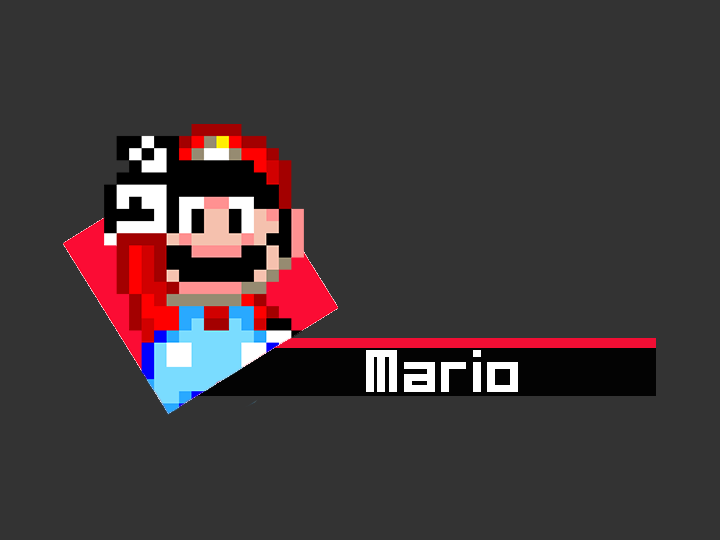
<style>
.page{position:relative;width:720px;height:540px;background:#333333}
.page>*{position:absolute;margin:0}
.t1{font:70px "Á¤9";letter-spacing:0.01em;color:#ffffff;font-weight:bold}
</style>
<div class="page">
<p class="t1" style="left:366px;top:350px;width:152px;height:42px">Mario</p>
</div>
